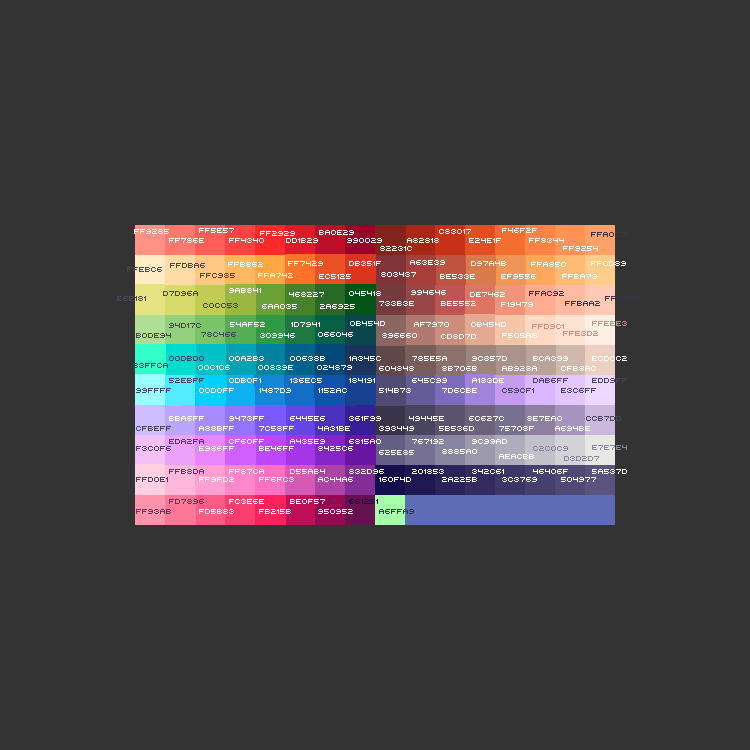
<style>
.page{position:relative;width:750px;height:750px;background:#333333}
.page>*{position:absolute;margin:0}
.t1{font:7px "RetroComputer";color:#ffffff}
.t2{font:7px "RetroComputer";color:#393449}
.t3{font:7px "RetroComputer";color:#49445e}
.t4{font:7px "RetroComputer";color:#cd8d7d}
.t5{font:7px "RetroComputer";color:#8885a0}
.t6{font:7px "RetroComputer";color:#160f4d}
</style>
<div class="page">
<p class="t1" style="left:134px;top:229px;width:35px;height:5px">ff9285</p>
<p class="t1" style="left:199px;top:228px;width:35px;height:5px">ff5e57</p>
<p class="t1" style="left:260px;top:231px;width:35px;height:5px">ff2929</p>
<p class="t1" style="left:319px;top:230px;width:35px;height:5px">ba0e29</p>
<p class="t1" style="left:439px;top:229px;width:32px;height:5px">c83017</p>
<p class="t1" style="left:502px;top:228px;width:35px;height:5px">f46f2f</p>
<p class="t2" style="left:591px;top:232px;width:35px;height:5px">ffa067</p>
<p class="t1" style="left:169px;top:238px;width:35px;height:5px">ff786e</p>
<p class="t1" style="left:229px;top:238px;width:35px;height:5px">ff4340</p>
<p class="t1" style="left:286px;top:238px;width:32px;height:5px">dd1b29</p>
<p class="t1" style="left:347px;top:238px;width:35px;height:5px">990029</p>
<p class="t1" style="left:380px;top:246px;width:32px;height:5px">82231c</p>
<p class="t1" style="left:407px;top:238px;width:32px;height:5px">a82818</p>
<p class="t1" style="left:469px;top:238px;width:32px;height:5px">e24e1f</p>
<p class="t1" style="left:529px;top:238px;width:35px;height:5px">ff8344</p>
<p class="t1" style="left:563px;top:246px;width:35px;height:5px">ff9254</p>
<p class="t3" style="left:127px;top:267px;width:35px;height:5px">ffebc6</p>
<p class="t3" style="left:170px;top:263px;width:35px;height:5px">ffdba6</p>
<p class="t1" style="left:228px;top:262px;width:35px;height:5px">ffb862</p>
<p class="t1" style="left:288px;top:261px;width:35px;height:5px">ff7429</p>
<p class="t1" style="left:349px;top:261px;width:32px;height:5px">db351f</p>
<p class="t1" style="left:410px;top:260px;width:35px;height:5px">a63e39</p>
<p class="t1" style="left:471px;top:261px;width:35px;height:5px">d97a4b</p>
<p class="t1" style="left:531px;top:262px;width:35px;height:5px">ffa85c</p>
<p class="t1" style="left:591px;top:261px;width:35px;height:5px">ffcd89</p>
<p class="t3" style="left:200px;top:273px;width:35px;height:5px">ffc985</p>
<p class="t1" style="left:258px;top:273px;width:35px;height:5px">ffa742</p>
<p class="t1" style="left:319px;top:274px;width:32px;height:5px">ec5125</p>
<p class="t1" style="left:381px;top:272px;width:35px;height:5px">803437</p>
<p class="t1" style="left:440px;top:274px;width:35px;height:5px">be533e</p>
<p class="t1" style="left:501px;top:274px;width:35px;height:5px">ef9556</p>
<p class="t1" style="left:562px;top:274px;width:35px;height:5px">ffba73</p>
<p class="t3" style="left:163px;top:291px;width:35px;height:5px">d7d96a</p>
<p class="t1" style="left:229px;top:288px;width:32px;height:5px">9ab841</p>
<p class="t1" style="left:289px;top:292px;width:35px;height:5px">468227</p>
<p class="t1" style="left:349px;top:291px;width:32px;height:5px">045418</p>
<p class="t1" style="left:411px;top:290px;width:35px;height:5px">994646</p>
<p class="t1" style="left:470px;top:292px;width:35px;height:5px">de7462</p>
<p class="t2" style="left:529px;top:291px;width:35px;height:5px">ffac92</p>
<p class="t3" style="left:117px;top:296px;width:29px;height:5px">e6e181</p>
<p class="t3" style="left:203px;top:303px;width:35px;height:5px">c0cc53</p>
<p class="t1" style="left:262px;top:304px;width:35px;height:5px">6aa035</p>
<p class="t1" style="left:320px;top:304px;width:35px;height:5px">2a6925</p>
<p class="t1" style="left:379px;top:301px;width:35px;height:5px">733b3e</p>
<p class="t1" style="left:441px;top:301px;width:35px;height:5px">be5552</p>
<p class="t1" style="left:501px;top:302px;width:32px;height:5px">f19479</p>
<p class="t2" style="left:565px;top:301px;width:35px;height:5px">ffbaa2</p>
<p class="t2" style="left:605px;top:296px;width:35px;height:5px">ffc9b5</p>
<p class="t3" style="left:169px;top:323px;width:32px;height:5px">94d17c</p>
<p class="t1" style="left:230px;top:322px;width:35px;height:5px">54af52</p>
<p class="t1" style="left:291px;top:322px;width:29px;height:5px">1d7941</p>
<p class="t1" style="left:350px;top:321px;width:35px;height:5px">0b454d</p>
<p class="t1" style="left:414px;top:322px;width:35px;height:5px">af7970</p>
<p class="t1" style="left:471px;top:322px;width:35px;height:5px">0b454d</p>
<p class="t4" style="left:532px;top:324px;width:32px;height:5px">ffd9c1</p>
<p class="t3" style="left:136px;top:333px;width:35px;height:5px">b0de94</p>
<p class="t3" style="left:201px;top:332px;width:35px;height:5px">78c466</p>
<p class="t1" style="left:260px;top:333px;width:35px;height:5px">309946</p>
<p class="t1" style="left:318px;top:332px;width:35px;height:5px">066046</p>
<p class="t1" style="left:382px;top:333px;width:35px;height:5px">896660</p>
<p class="t1" style="left:441px;top:334px;width:35px;height:5px">cd8d7d</p>
<p class="t1" style="left:502px;top:333px;width:35px;height:5px">f5c5a8</p>
<p class="t4" style="left:563px;top:331px;width:35px;height:5px">ffe3d2</p>
<p class="t3" style="left:133px;top:363px;width:35px;height:5px">33ffca</p>
<p class="t3" style="left:169px;top:356px;width:35px;height:5px">00dbd0</p>
<p class="t1" style="left:198px;top:365px;width:32px;height:5px">00c1c6</p>
<p class="t1" style="left:229px;top:356px;width:35px;height:5px">00a2b3</p>
<p class="t1" style="left:258px;top:365px;width:35px;height:5px">00839e</p>
<p class="t1" style="left:290px;top:356px;width:35px;height:5px">00638b</p>
<p class="t1" style="left:317px;top:365px;width:35px;height:5px">024879</p>
<p class="t1" style="left:349px;top:356px;width:32px;height:5px">1a345c</p>
<p class="t1" style="left:379px;top:366px;width:35px;height:5px">604848</p>
<p class="t1" style="left:412px;top:356px;width:35px;height:5px">785e5a</p>
<p class="t1" style="left:442px;top:366px;width:35px;height:5px">8b706b</p>
<p class="t1" style="left:472px;top:356px;width:35px;height:5px">9c857d</p>
<p class="t1" style="left:502px;top:366px;width:35px;height:5px">ab928a</p>
<p class="t1" style="left:533px;top:356px;width:35px;height:5px">bca399</p>
<p class="t1" style="left:561px;top:366px;width:35px;height:5px">cfb8ac</p>
<p class="t1" style="left:592px;top:356px;width:35px;height:5px">ecd0c2</p>
<p class="t3" style="left:136px;top:388px;width:35px;height:5px">99ffff</p>
<p class="t3" style="left:169px;top:378px;width:35px;height:5px">52ebff</p>
<p class="t1" style="left:199px;top:388px;width:35px;height:5px">00d0ff</p>
<p class="t1" style="left:229px;top:378px;width:32px;height:5px">0db0f1</p>
<p class="t1" style="left:259px;top:388px;width:32px;height:5px">1487d9</p>
<p class="t1" style="left:290px;top:378px;width:32px;height:5px">136ec5</p>
<p class="t1" style="left:318px;top:388px;width:29px;height:5px">1152ac</p>
<p class="t1" style="left:349px;top:378px;width:26px;height:5px">184191</p>
<p class="t1" style="left:379px;top:388px;width:32px;height:5px">514b73</p>
<p class="t1" style="left:412px;top:378px;width:35px;height:5px">645c99</p>
<p class="t1" style="left:442px;top:388px;width:35px;height:5px">7d6cbe</p>
<p class="t1" style="left:472px;top:378px;width:32px;height:5px">a183de</p>
<p class="t3" style="left:502px;top:388px;width:32px;height:5px">c59cf1</p>
<p class="t3" style="left:533px;top:378px;width:35px;height:5px">dab6ff</p>
<p class="t3" style="left:561px;top:388px;width:35px;height:5px">e3c6ff</p>
<p class="t3" style="left:592px;top:378px;width:35px;height:5px">edd9ff</p>
<p class="t1" style="left:169px;top:416px;width:35px;height:5px">bba6ff</p>
<p class="t1" style="left:229px;top:416px;width:35px;height:5px">9473ff</p>
<p class="t1" style="left:290px;top:416px;width:35px;height:5px">6445e6</p>
<p class="t1" style="left:349px;top:416px;width:32px;height:5px">361f99</p>
<p class="t1" style="left:409px;top:416px;width:35px;height:5px">49445e</p>
<p class="t1" style="left:469px;top:416px;width:35px;height:5px">6c627c</p>
<p class="t1" style="left:527px;top:416px;width:35px;height:5px">8e7ea0</p>
<p class="t3" style="left:586px;top:416px;width:35px;height:5px">ccb7dd</p>
<p class="t3" style="left:136px;top:426px;width:35px;height:5px">cfbeff</p>
<p class="t1" style="left:199px;top:426px;width:35px;height:5px">a88bff</p>
<p class="t1" style="left:259px;top:426px;width:35px;height:5px">7c58ff</p>
<p class="t1" style="left:318px;top:426px;width:32px;height:5px">4a31be</p>
<p class="t1" style="left:379px;top:426px;width:35px;height:5px">393449</p>
<p class="t1" style="left:439px;top:426px;width:35px;height:5px">5b536d</p>
<p class="t1" style="left:499px;top:426px;width:35px;height:5px">75708f</p>
<p class="t1" style="left:555px;top:426px;width:35px;height:5px">a694be</p>
<p class="t3" style="left:136px;top:446px;width:35px;height:5px">f3c0f6</p>
<p class="t3" style="left:169px;top:439px;width:35px;height:5px">eda2fa</p>
<p class="t1" style="left:199px;top:446px;width:35px;height:5px">e986ff</p>
<p class="t1" style="left:229px;top:439px;width:35px;height:5px">cf60ff</p>
<p class="t1" style="left:259px;top:446px;width:35px;height:5px">be46ff</p>
<p class="t1" style="left:290px;top:439px;width:35px;height:5px">a435e9</p>
<p class="t1" style="left:318px;top:446px;width:35px;height:5px">8425c6</p>
<p class="t1" style="left:349px;top:439px;width:32px;height:5px">6815a0</p>
<p class="t1" style="left:412px;top:439px;width:32px;height:5px">767192</p>
<p class="t1" style="left:442px;top:449px;width:35px;height:5px">8885a0</p>
<p class="t1" style="left:472px;top:439px;width:35px;height:5px">9c99ad</p>
<p class="t5" style="left:533px;top:446px;width:35px;height:5px">c2c0c9</p>
<p class="t1" style="left:379px;top:450px;width:35px;height:5px">625e85</p>
<p class="t1" style="left:499px;top:454px;width:35px;height:5px">aeacbb</p>
<p class="t5" style="left:564px;top:456px;width:35px;height:5px">d3d2d7</p>
<p class="t3" style="left:169px;top:469px;width:35px;height:5px">ffb8da</p>
<p class="t1" style="left:229px;top:469px;width:35px;height:5px">ff87ca</p>
<p class="t1" style="left:290px;top:469px;width:35px;height:5px">d55ab4</p>
<p class="t1" style="left:349px;top:469px;width:35px;height:5px">832d96</p>
<p class="t1" style="left:412px;top:469px;width:32px;height:5px">201853</p>
<p class="t1" style="left:472px;top:469px;width:32px;height:5px">342c61</p>
<p class="t1" style="left:533px;top:469px;width:35px;height:5px">46406f</p>
<p class="t1" style="left:592px;top:469px;width:35px;height:5px">5a537d</p>
<p class="t3" style="left:136px;top:477px;width:32px;height:5px">ffd0e1</p>
<p class="t1" style="left:199px;top:477px;width:35px;height:5px">ff9fd2</p>
<p class="t1" style="left:259px;top:477px;width:35px;height:5px">ff6fc3</p>
<p class="t1" style="left:318px;top:477px;width:35px;height:5px">ac44a6</p>
<p class="t1" style="left:379px;top:477px;width:32px;height:5px">160f4d</p>
<p class="t1" style="left:442px;top:477px;width:35px;height:5px">2a225b</p>
<p class="t1" style="left:502px;top:477px;width:35px;height:5px">3c3769</p>
<p class="t1" style="left:561px;top:477px;width:35px;height:5px">504977</p>
<p class="t3" style="left:136px;top:509px;width:35px;height:5px">ff93ab</p>
<p class="t3" style="left:169px;top:499px;width:35px;height:5px">fd7896</p>
<p class="t1" style="left:199px;top:509px;width:35px;height:5px">fd5b83</p>
<p class="t1" style="left:229px;top:499px;width:35px;height:5px">fc3e6e</p>
<p class="t1" style="left:259px;top:509px;width:32px;height:5px">fb215b</p>
<p class="t1" style="left:290px;top:499px;width:35px;height:5px">be0f57</p>
<p class="t1" style="left:318px;top:509px;width:35px;height:5px">950952</p>
<p class="t6" style="left:349px;top:499px;width:29px;height:5px">661251</p>
<p class="t2" style="left:379px;top:509px;width:35px;height:5px">a6ffa9</p>
</div>
